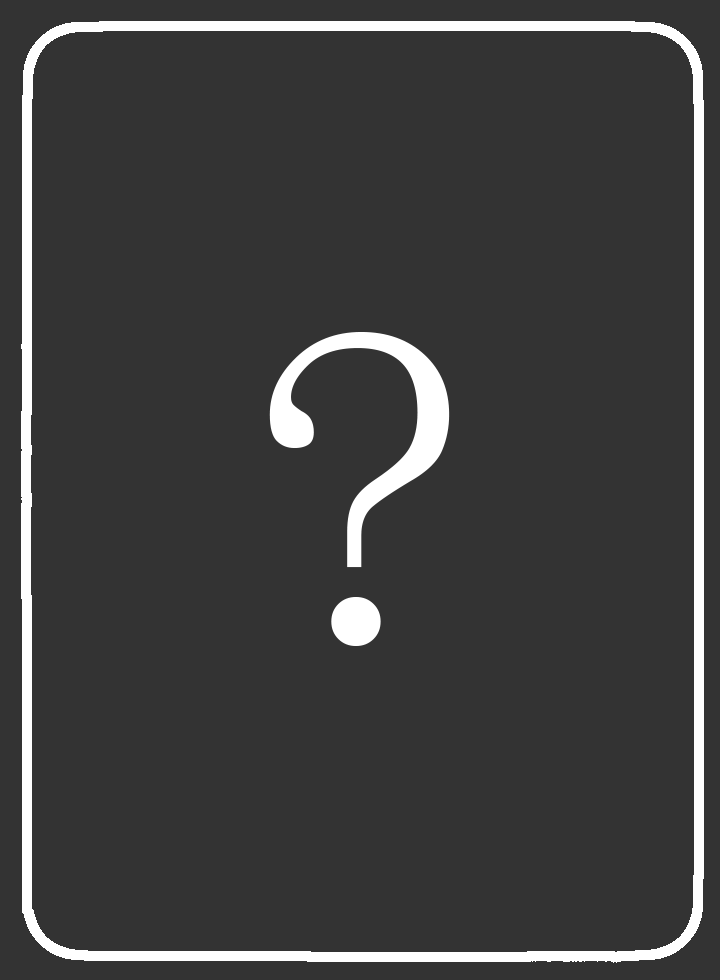
<style>
.page{position:relative;width:720px;height:980px;background:#333333}
.page>*{position:absolute;margin:0}
.t1{font:450px "NSimSun";color:#ffffff}
</style>
<div class="page">
<p class="t1" style="left:269px;top:332px;width:181px;height:314px">?</p>
</div>
